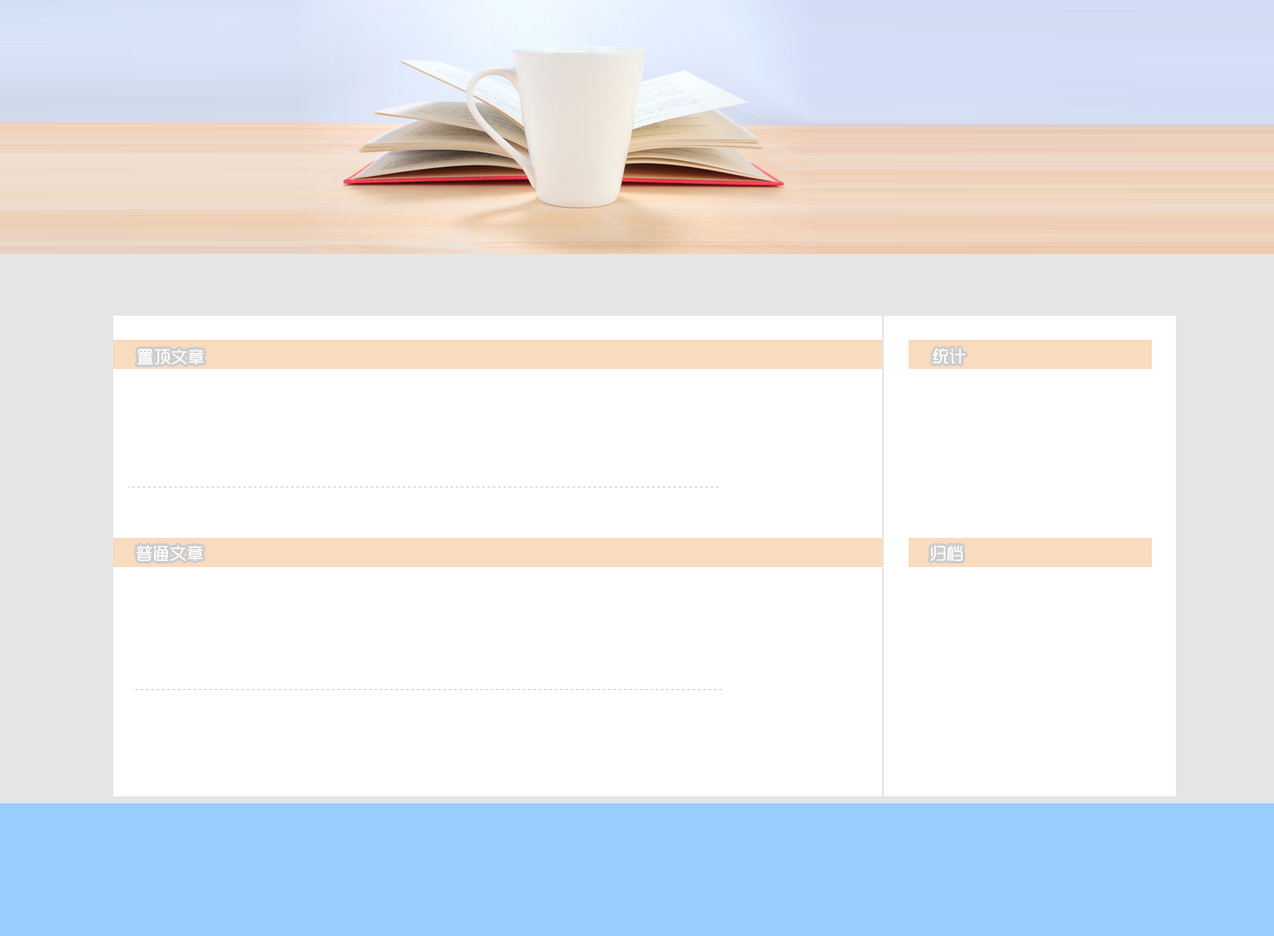
<style>
.page{position:relative;width:1274px;height:936px;background:#ffffff}
.page>*{position:absolute;margin:0}
.t1{font:16.5px "MFYueHei_Noncommercial-Regular";color:#ffffff;font-weight:bold}
</style>
<div class="page">
<p class="t1" style="left:137px;top:349px;width:67px;height:15px">置顶文章</p>
<p class="t1" style="left:932px;top:348px;width:33px;height:16px">统计</p>
<p class="t1" style="left:136px;top:545px;width:67px;height:16px">普通文章</p>
<p class="t1" style="left:930px;top:545px;width:33px;height:16px">归档</p>
</div>
